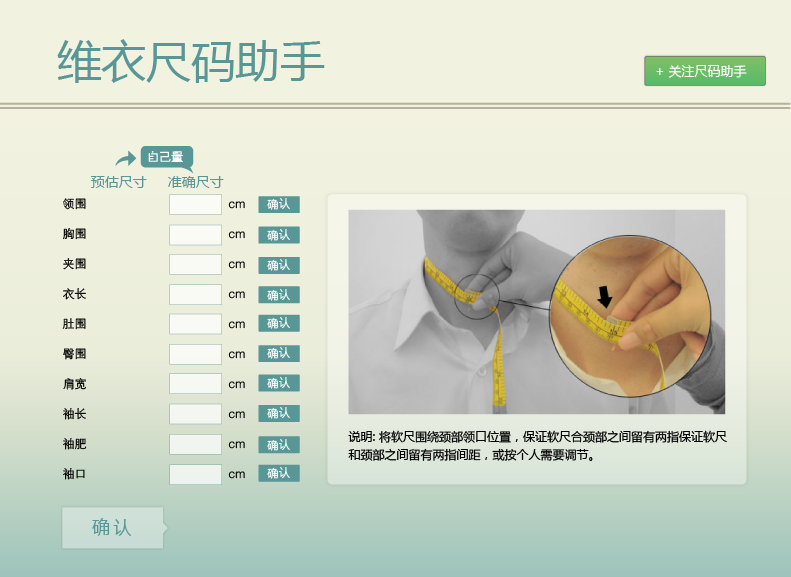
<style>
.page{position:relative;width:791px;height:577px;background:#f2f2e0}
.page>*{position:absolute;margin:0}
.t1{font:44.7px "MicrosoftYaHei";color:#599696}
.t2{font:13px "MicrosoftYaHei";color:#ffffff}
.t3{font:12px "FZZHYJW--GB1-0";color:#ffffff}
.t4{font:14px "MicrosoftYaHei";color:#599696}
.t5{font:12px/15px "FZZDXJW--GB1-0";color:#000000}
.t6{font:11px "MicrosoftYaHei";letter-spacing:0.075em;color:#ffffff}
.t7{font:12px/18px "MicrosoftYaHei";color:#000000}
.t8{font:18px "MicrosoftYaHei";letter-spacing:0.2em;color:#599696}
</style>
<div class="page">
<p class="t1" style="left:57px;top:39px;width:268px;height:44px">维衣尺码助手</p>
<p class="t2" style="left:656px;top:65px;width:91px;height:13px">+ 关注尺码助手</p>
<p class="t3" style="left:148px;top:151px;width:35px;height:11px">自己量</p>
<p class="t4" style="left:90px;top:176px;width:57px;height:12px">预估尺寸</p>
<p class="t4" style="left:168px;top:176px;width:56px;height:12px">准确尺寸</p>
<p class="t5" style="left:62px;top:198px;width:25px;height:282px">领围<br> <br>胸围<br> <br>夹围<br> <br>衣长<br> <br>肚围<br> <br>臀围<br> <br>肩宽<br> <br>袖长<br><br>袖肥<br><br>袖口</p>
<p class="t6" style="left:267px;top:198px;width:23px;height:12px">确认</p>
<p class="t5" style="left:228px;top:201px;width:17px;height:278px">cm<br> <br>cm<br> <br>cm<br> <br>cm<br> <br>cm<br> <br>cm<br> <br>cm<br> <br>cm<br><br>cm<br><br>cm</p>
<p class="t6" style="left:267px;top:229px;width:23px;height:12px">确认</p>
<p class="t6" style="left:267px;top:259px;width:23px;height:12px">确认</p>
<p class="t6" style="left:267px;top:289px;width:23px;height:12px">确认</p>
<p class="t6" style="left:267px;top:317px;width:23px;height:12px">确认</p>
<p class="t6" style="left:267px;top:347px;width:23px;height:12px">确认</p>
<p class="t6" style="left:267px;top:377px;width:23px;height:12px">确认</p>
<p class="t6" style="left:267px;top:407px;width:23px;height:12px">确认</p>
<p class="t7" style="left:348px;top:430px;width:379px;height:31px">说明: 将软尺围绕颈部领口位置，保证软尺合颈部之间留有两指保证软尺和颈部之间留有两指间距，或按个人需要调节。</p>
<p class="t6" style="left:267px;top:439px;width:23px;height:12px">确认</p>
<p class="t6" style="left:267px;top:467px;width:23px;height:12px">确认</p>
<p class="t8" style="left:92px;top:518px;width:40px;height:18px">确认</p>
</div>
